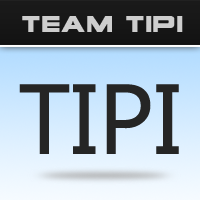
<style>
.page{position:relative;width:200px;height:200px}
.page>*{position:absolute;margin:0}
.t1{font:37px "voxBOX";color:#cecece}
.t2{font:92px "MicrosoftYaHei";color:#252525}
</style>
<div class="page">
<p class="t1" style="left:22px;top:16px;width:161px;height:16px">team tipi</p>
<p class="t2" style="left:19px;top:84px;width:160px;height:70px">TIPI</p>
</div>
